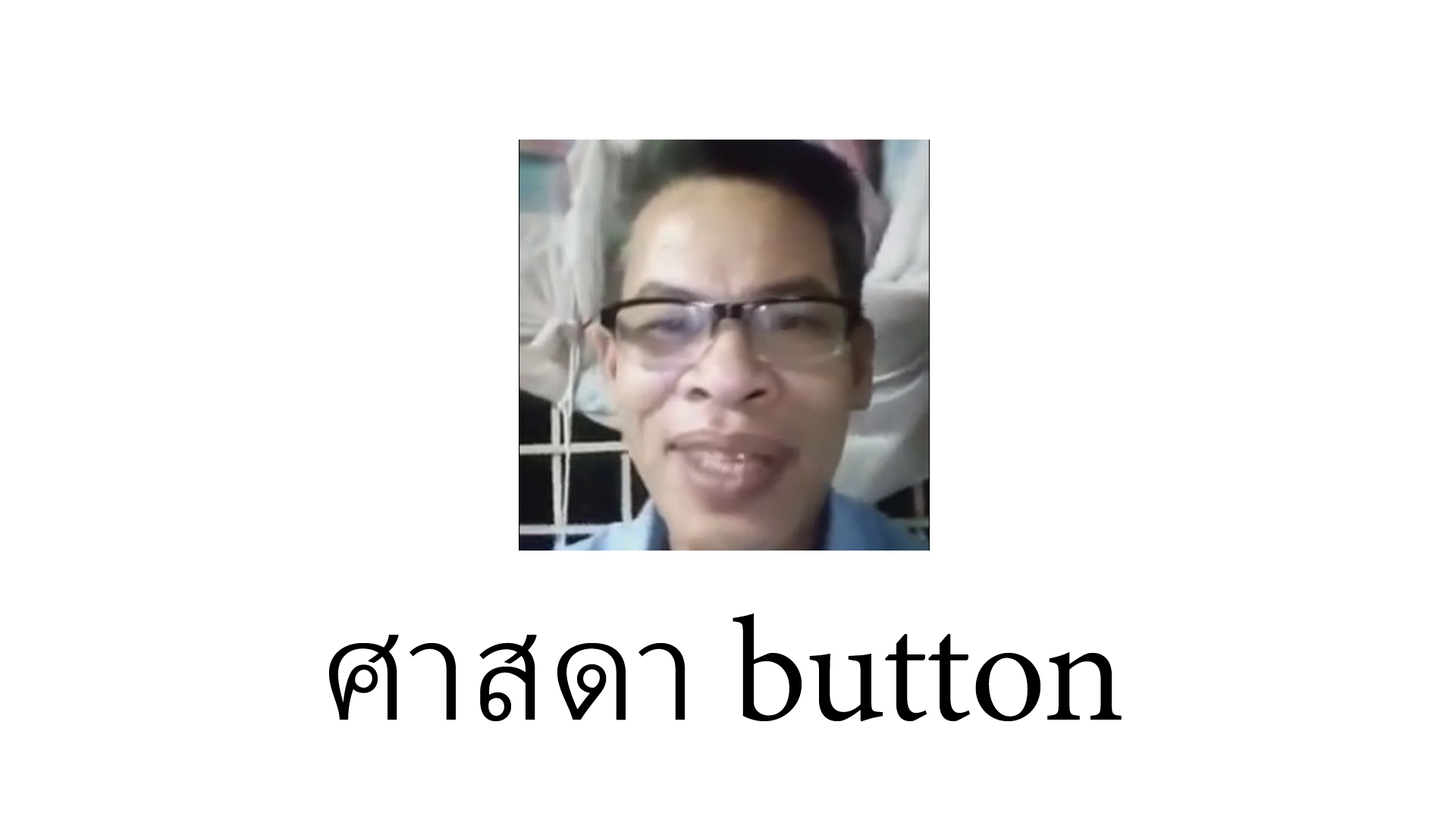
<style>
.page{position:relative;width:1456px;height:819px;background:#ffffff}
.page>*{position:absolute;margin:0}
.t1{font:182px "AdobeThai-Regular";color:#000000}
</style>
<div class="page">
<p class="t1" style="left:329px;top:613px;width:793px;height:109px">ศาสดา button</p>
</div>
